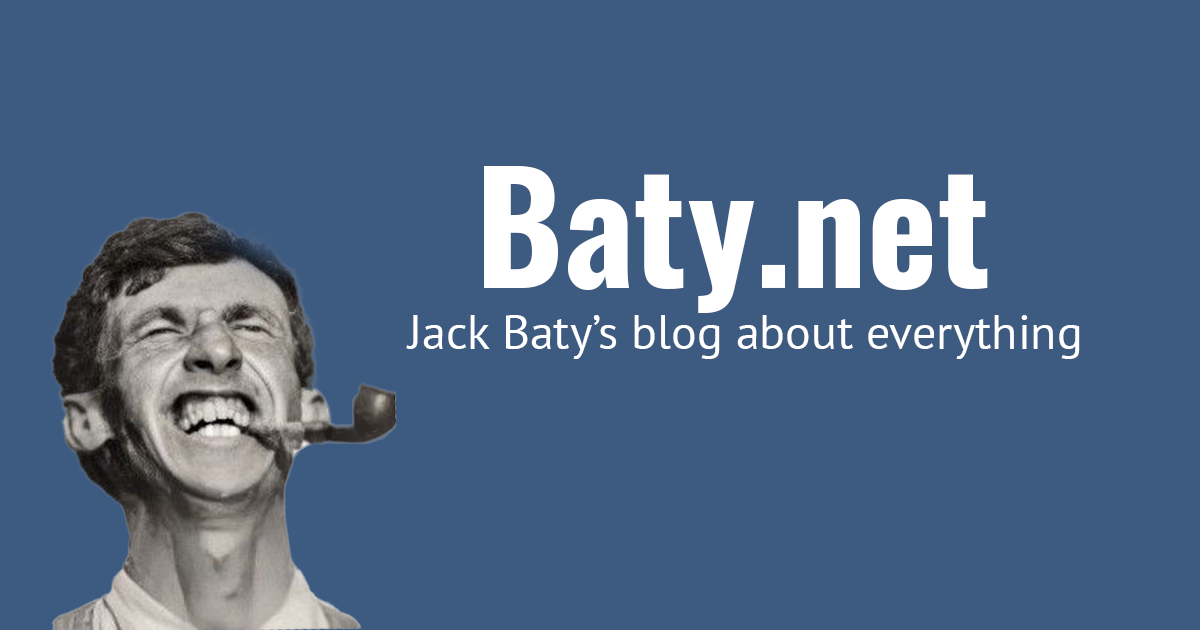
<style>
.page{position:relative;width:1200px;height:630px;background:#3d5a80}
.page>*{position:absolute;margin:0}
.t1{font:150px "Oswald-Bold";color:#ffffff}
.t2{font:48px "PTSans-Regular";color:#ffffff}
</style>
<div class="page">
<p class="t1" style="left:484px;top:166px;width:504px;height:147px">Baty.net</p>
<p class="t2" style="left:406px;top:315px;width:674px;height:44px">Jack Baty’s blog about everything</p>
</div>
